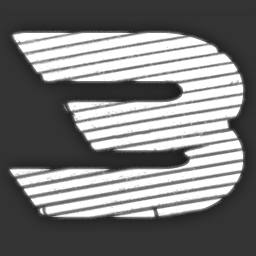
<style>
.page{position:relative;width:256px;height:256px;background:#333333}
.page>*{position:absolute;margin:0}
.t1{font:254.7px "Ethnocentric";letter-spacing:0.05em;color:#ffffff;scale:0.93 1}
</style>
<div class="page">
<p class="t1" style="left:9px;top:33px;width:234px;height:184px">3</p>
</div>
